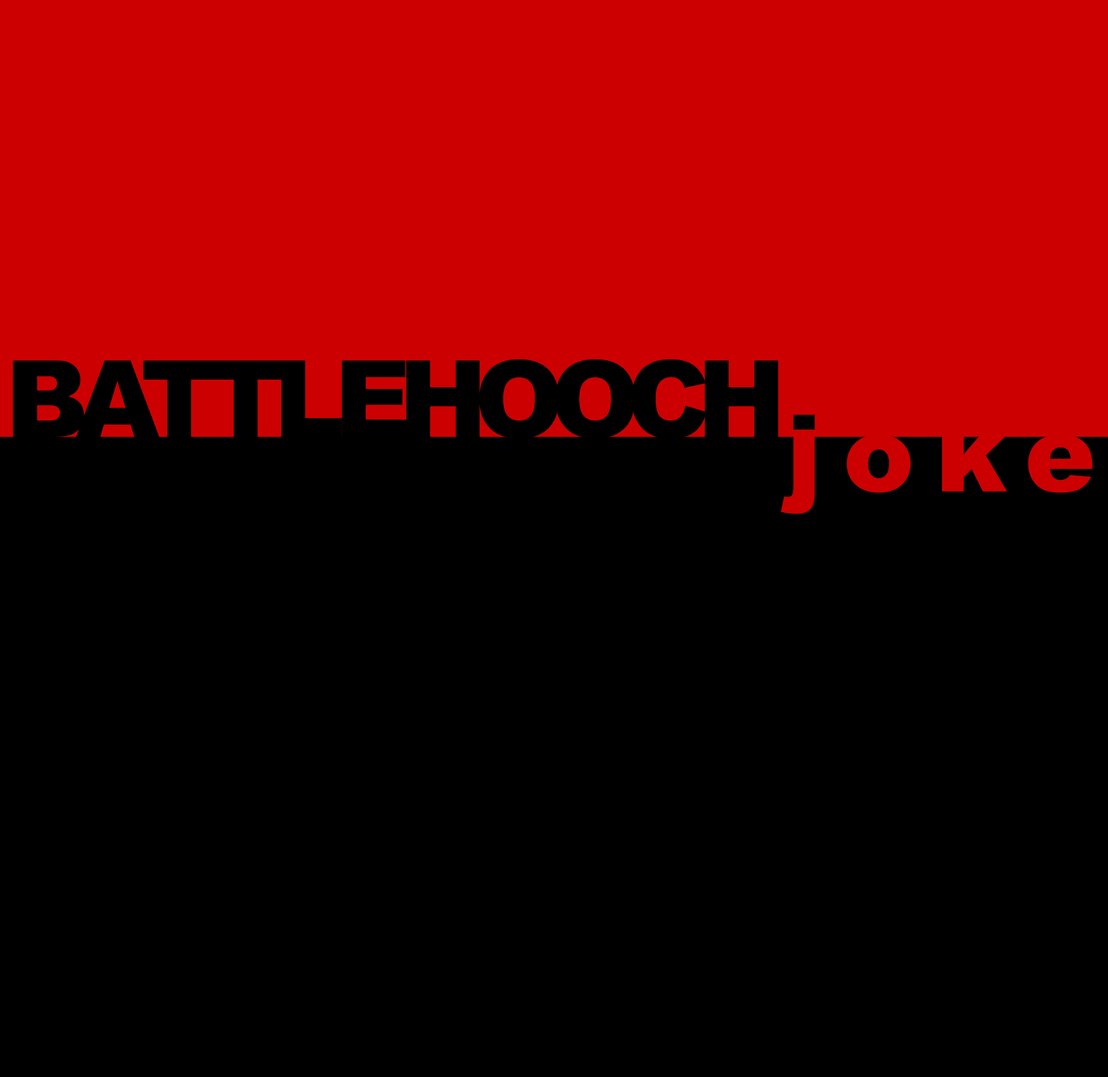
<style>
.page{position:relative;width:1108px;height:1077px;background:#000000}
.page>*{position:absolute;margin:0}
.t1{font:106.7px "Arial-Black";letter-spacing:-0.12em;color:#000000}
.t2{font:106.7px "Arial-Black";letter-spacing:-0.1em;color:#000000}
.t3{font:106.7px "Arial-Black";letter-spacing:0.2em;color:#cc0000}
</style>
<div class="page">
<p class="t1" style="left:13px;top:359px;width:765px;height:80px"><span class="t2">BATTL</span>EHOOCH</p>
<p class="t3" style="left:781px;top:415px;width:311px;height:99px">joke</p>
<p class="t3" style="left:781px;top:415px;width:311px;height:99px">joke</p>
</div>
